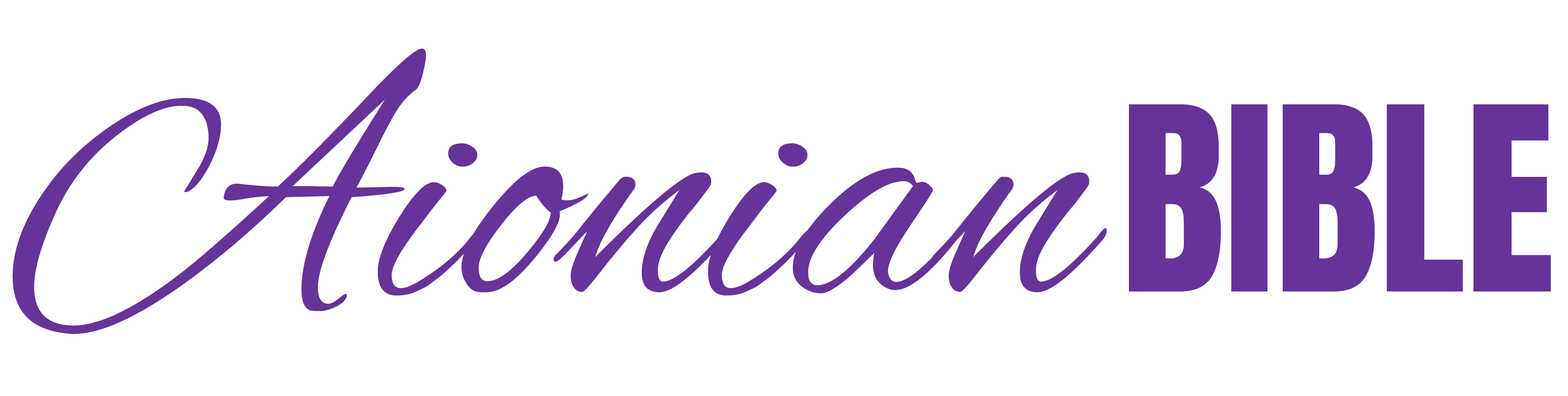
<style>
.page{position:relative;width:1568px;height:396px;background:#ffffff}
.page>*{position:absolute;margin:0}
.t1{font:363px "AlexBrush-Regular";color:#663399}
.t2{font:217.8px "Anton-Regular";color:#663399}
</style>
<div class="page">
<p class="t1" style="left:13px;top:48px;width:1094px;height:286px">Aionian</p>
<p class="t2" style="left:1129px;top:104px;width:422px;height:187px">BIBLE</p>
</div>
